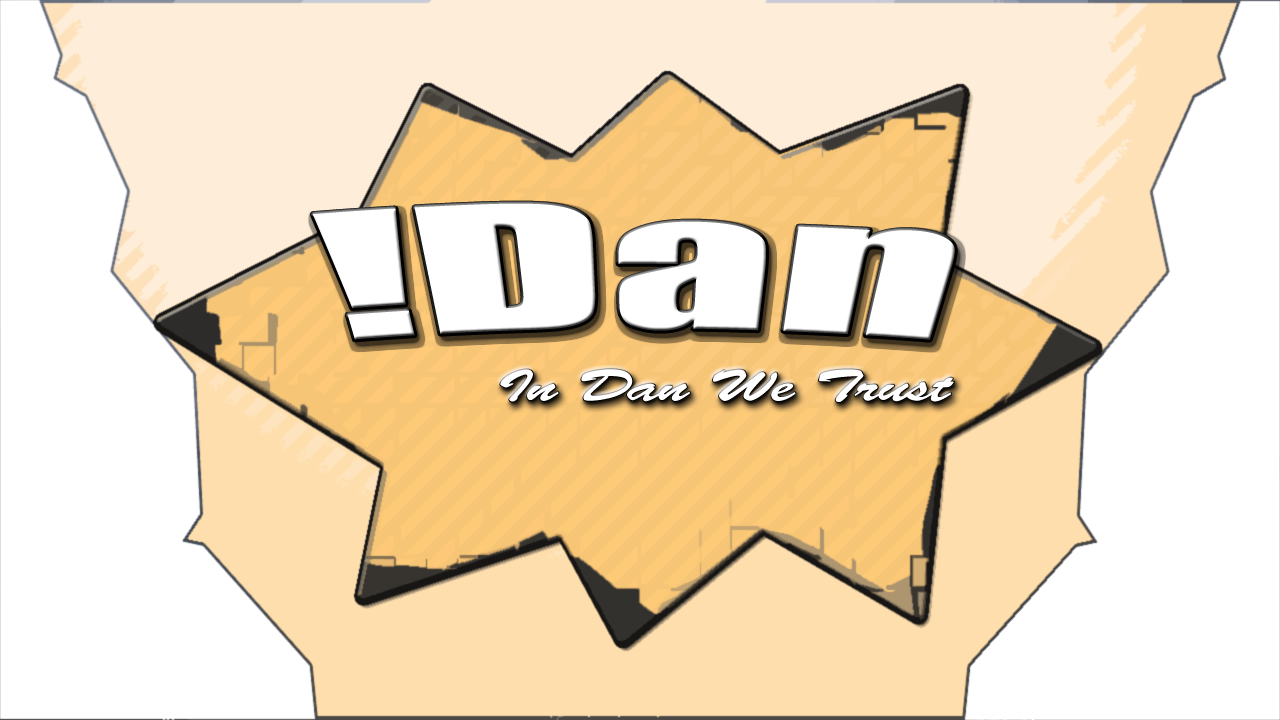
<style>
.page{position:relative;width:1280px;height:720px;background:#ffffff}
.page>*{position:absolute;margin:0}
.t1{font:160.1px "Impact";letter-spacing:-0.01em;color:#ffffff;scale:1.95 1}
.t2{font:44.3px "BrushScriptStd";letter-spacing:-0.01em;color:#ffffff;scale:1.45 1}
</style>
<div class="page">
<p class="t1" style="left:312px;top:203px;width:643px;height:137px">!Dan</p>
<p class="t2" style="left:500px;top:369px;width:455px;height:33px">In Dan We Trust</p>
</div>
